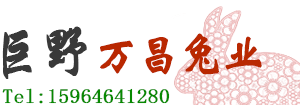
<style>
.page{position:relative;width:300px;height:105px;background:#ffffff}
.page>*{position:absolute;margin:0}
.t1{font:59.7px "STXingkai";color:#393939;font-weight:bold;scale:0.83 1}
.t2{font:48.3px "STXinwei";color:#b92801;font-weight:bold;scale:0.86 1}
.t3{font:20px "SimSun";color:#078901;font-weight:bold;scale:1.06 1}
</style>
<div class="page">
<p class="t1" style="left:2px;top:26px;width:85px;height:53px">巨野</p>
<p class="t2" style="left:100px;top:33px;width:162px;height:42px">万昌兔业</p>
<p class="t3" style="left:2px;top:88px;width:168px;height:16px">Tel:15964641280</p>
</div>
